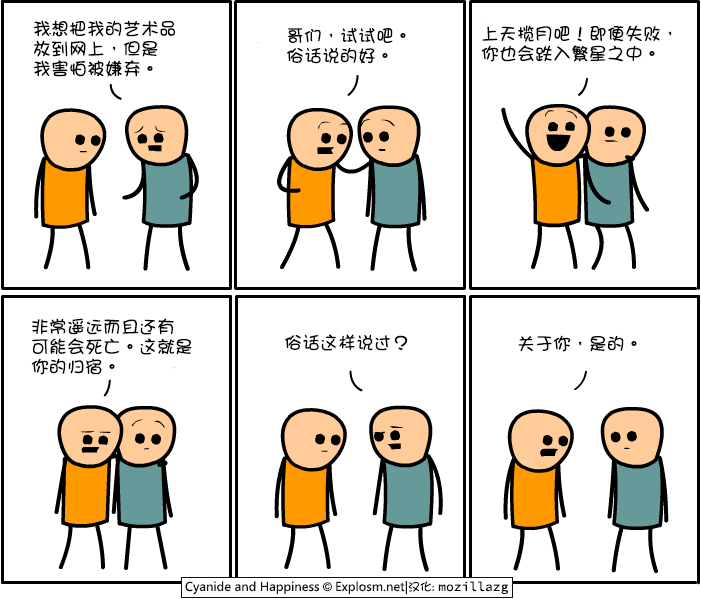
<style>
.page{position:relative;width:701px;height:599px;background:#ffffff}
.page>*{position:absolute;margin:0}
.t1{font:18px/20px "DFGirl";color:#000000}
.t2{font:18px "DFGirl";color:#000000}
</style>
<div class="page">
<p class="t1" style="left:33px;top:20px;width:142px;height:57px">我想把我的艺术品<br>放到网上，但是<br>我害怕被嫌弃。</p>
<p class="t1" style="left:287px;top:27px;width:119px;height:37px">哥们，试试吧。<br>俗话说的好。</p>
<p class="t1" style="left:481px;top:25px;width:191px;height:37px">上天揽月吧！即便失败，<br>你也会跌入繁星之中。</p>
<p class="t1" style="left:31px;top:318px;width:161px;height:57px">非常遥远而且还有<br>可能会死亡。这就是<br>你的归宿。</p>
<p class="t2" style="left:285px;top:334px;width:123px;height:17px">俗话这样说过？</p>
<p class="t2" style="left:518px;top:335px;width:119px;height:17px">关于你，是的。</p>
</div>
